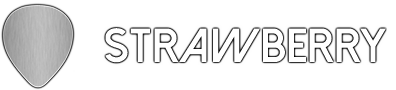
<style>
.page{position:relative;width:396px;height:90px;background:#ffffff}
.page>*{position:absolute;margin:0}
.t1{font:48px "DolceVitaHeavy-Bold";color:#ffffff}
</style>
<div class="page">
<p class="t1" style="left:105px;top:28px;width:281px;height:35px">Strawberry</p>
</div>
